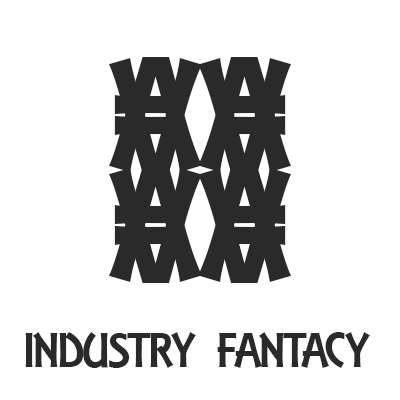
<style>
.page{position:relative;width:400px;height:400px;background:#ffffff}
.page>*{position:absolute;margin:0}
.t1{font:172px "ARESSENCE";color:#2a2a2a}
.t2{font:52px "ARESSENCE";letter-spacing:-0.02em;color:#2a2a2a}
</style>
<div class="page">
<p class="t1" style="left:109px;top:57px;width:93px;height:115px">A</p>
<p class="t1" style="left:109px;top:58px;width:93px;height:115px">A</p>
<p class="t1" style="left:198px;top:58px;width:93px;height:115px;rotate:180deg">A</p>
<p class="t1" style="left:198px;top:57px;width:93px;height:115px;rotate:180deg">A</p>
<p class="t1" style="left:109px;top:167px;width:93px;height:115px">A</p>
<p class="t1" style="left:109px;top:168px;width:93px;height:115px">A</p>
<p class="t1" style="left:198px;top:168px;width:93px;height:115px;rotate:180deg">A</p>
<p class="t1" style="left:198px;top:167px;width:93px;height:115px;rotate:180deg">A</p>
<p class="t2" style="left:25px;top:332px;width:345px;height:36px">INDUSTRY FANTACY</p>
</div>
